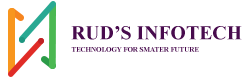
<style>
.page{position:relative;width:250px;height:78px;background:#ffffff}
.page>*{position:absolute;margin:0}
.t1{font:19.8px "TimesNewRomanPS-BoldMT";color:#480b4d}
.t2{font:6.9px "TimesNewRomanPS-BoldMT";color:#480b4d}
</style>
<div class="page">
<p class="t1" style="left:71px;top:26px;width:171px;height:14px">RUD’S INFOTECH</p>
<p class="t2" style="left:71px;top:47px;width:128px;height:5px">TECHNOLOGY FOR SMATER FUTURE</p>
</div>
